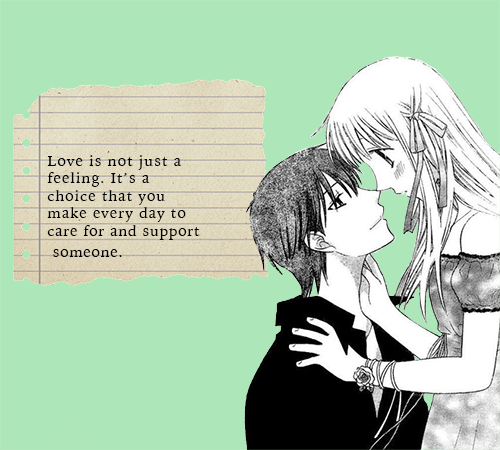
<style>
.page{position:relative;width:500px;height:450px;background:#ade6b8}
.page>*{position:absolute;margin:0}
.t1{font:15px/17.4px "IowanOldStyle-Roman";letter-spacing:0.075em;color:#000000}
.t2{font:14.6px/21.3px "IowanOldStyle-Roman";letter-spacing:0.075em;color:#000000}
</style>
<div class="page">
<p class="t1" style="left:47px;top:155px;width:139px;height:67px">Love is not just a feeling. It’s a choice that you make every day to</p>
<p class="t2" style="left:47px;top:225px;width:153px;height:32px">care for and support<br> someone.</p>
</div>
